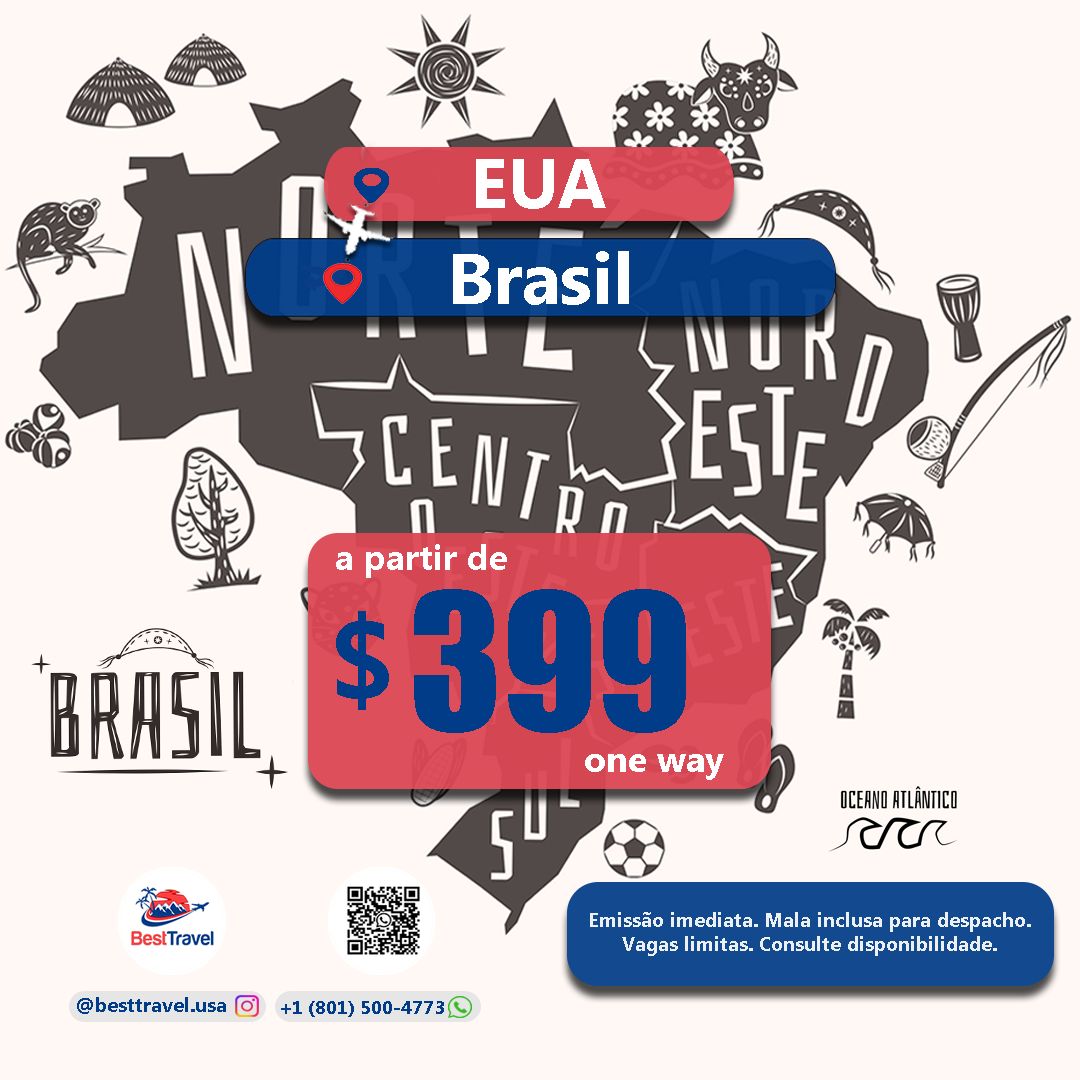
<style>
.page{position:relative;width:1080px;height:1080px;background:#fff8f5}
.page>*{position:absolute;margin:0}
.t1{font:70px "MyanmarText-Bold";color:#ffffff}
.t2{font:72px "MyanmarText-Bold";color:#ffffff}
.t3{font:35px "MyanmarText-Bold";color:#ffffff}
.t4{font:175px "Impact";color:#003c87}
.t5{font:111px "MyanmarText-Bold";color:#003c87}
.t6{font:36px "MyanmarText-Bold";color:#ffffff}
.t7{font:20px "MyanmarText-Bold";color:#ecf0f3}
.t8{font:20px "MyanmarText-Bold";color:#003c87}
.t9{font:19px "MyanmarText-Bold";color:#003c87}
</style>
<div class="page">
<p class="t1" style="left:476px;top:159px;width:130px;height:50px">EUA</p>
<p class="t2" style="left:453px;top:251px;width:176px;height:54px">Brasil</p>
<p class="t3" style="left:336px;top:544px;width:171px;height:34px">a partir de</p>
<p class="t4" style="left:414px;top:589px;width:272px;height:144px">399</p>
<p class="t5" style="left:336px;top:611px;width:53px;height:99px">$</p>
<p class="t6" style="left:585px;top:754px;width:139px;height:26px">one way</p>
<p class="t7" style="left:590px;top:912px;width:441px;height:44px;text-align:center">Emissão imediata. Mala inclusa para despacho.<br>Vagas limitas. Consulte disponibilidade.</p>
<p class="t8" style="left:77px;top:997px;width:149px;height:17px">@besttravel.usa</p>
<p class="t9" style="left:281px;top:1001px;width:163px;height:16px">+1 (801) 500-4773</p>
</div>
